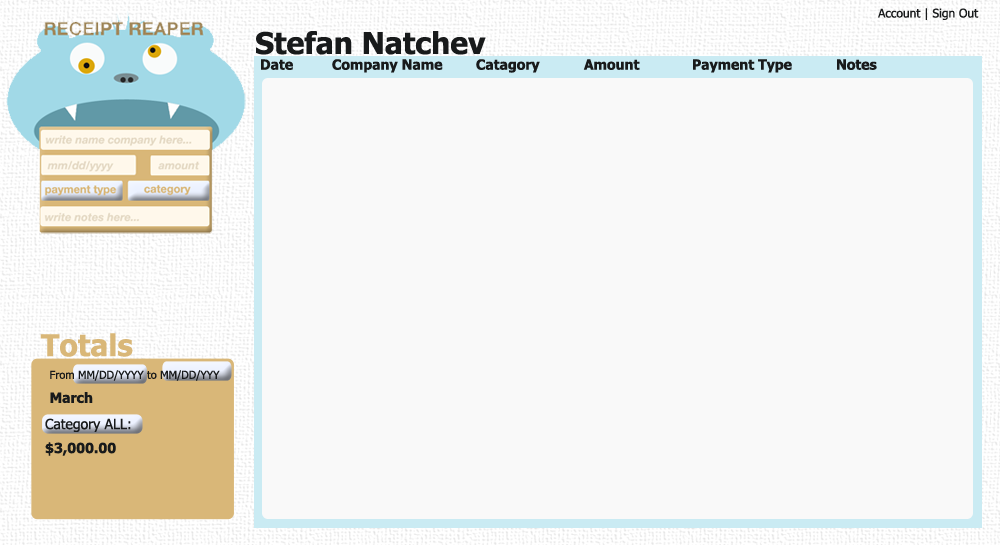
<style>
.page{position:relative;width:1000px;height:545px;background:#f9f9f9}
.page>*{position:absolute;margin:0}
.t1{font:12px "Tahoma";color:#181a1b}
.t2{font:30px "Tahoma-Bold";color:#181a1b}
.t3{font:14px "Tahoma-Bold";color:#181a1b}
.t4{font:30px "Tahoma-Bold";color:#d9b778}
.t5{font:11px/12px "Tahoma";color:#181a1b}
.t6{font:14px/12px "Tahoma-Bold";color:#181a1b}
.t7{font:14px/12px "Tahoma";color:#181a1b}
</style>
<div class="page">
<p class="t1" style="left:878px;top:8px;width:101px;height:12px">Account | Sign Out</p>
<p class="t2" style="left:256px;top:31px;width:230px;height:24px">Stefan Natchev</p>
<p class="t3" style="left:261px;top:59px;width:616px;height:14px">Date  Company Name Catagory  Amount  Payment Type  Notes</p>
<p class="t4" style="left:40px;top:333px;width:93px;height:24px">Totals</p>
<p class="t5" style="left:50px;top:370px;width:170px;height:34px">From MM/DD/YYYY to MM/DD/YYY<br><br><span class="t6">March</span></p>
<p class="t7" style="left:45px;top:418px;width:86px;height:38px">Category ALL:<br><br><span class="t6">$3,000.00</span></p>
</div>
